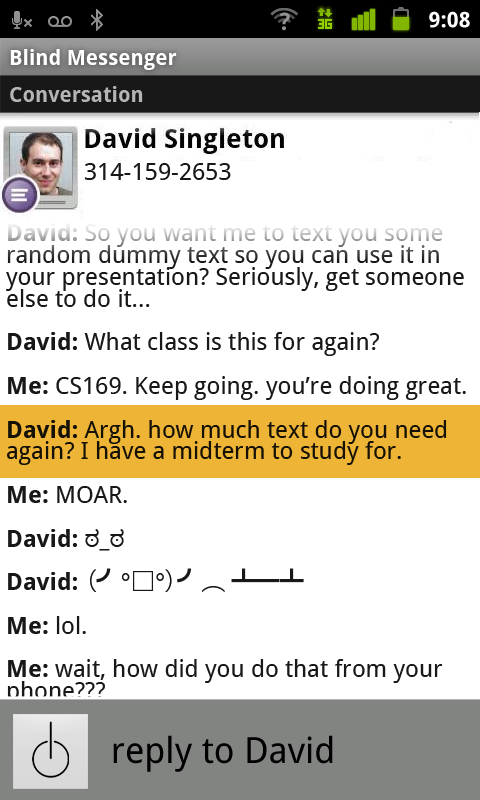
<style>
.page{position:relative;width:480px;height:800px;background:#ffffff}
.page>*{position:absolute;margin:0}
.t1{font:21.5px "DroidSans-Bold";letter-spacing:0.005em;color:#ffffff}
.t2{font:21px "DroidSans-Bold";color:#ffffff}
.t3{font:21px "DroidSans-Bold";color:#b5b5b5}
.t4{font:24px "DroidSans";color:#181818}
.t5{font:24px/21.8px "DroidSans";color:#181818}
.t6{font:24px/21.8px "DroidSans-Bold";color:#181818}
.t7{font:24px/21.8px "Tunga";color:#181818}
.t8{font:24px/21.8px "KozGoPr6N-Regular";color:#181818}
.t9{font:36px "DroidSans";color:#000000}
</style>
<div class="page">
<p class="t1" style="left:429px;top:11px;width:41px;height:17px">9:08</p>
<p class="t2" style="left:10px;top:49px;width:167px;height:21px">Blind Messenger</p>
<p class="t3" style="left:10px;top:86px;width:133px;height:16px">Conversation</p>
<p class="t4" style="left:84px;top:163px;width:147px;height:17px">314-159-2653</p>
<p class="t5" style="left:6px;top:223px;width:460px;height:482px"><span class="t6">David: </span>So you want me to text you some random dummy text so you can use it in your presentation? Seriously, get someone else to do it...<br><br><span class="t6">David: </span>What class is this for again?<br><br><span class="t6">Me:</span> CS169. Keep going. you’re doing great.<br><br><span class="t6">David: </span>Argh. how much text do you need again? I have a midterm to study for.<br><br><span class="t6">Me: </span>MOAR.<br><br><span class="t6">David: </span><span class="t7">ಠ</span>_<span class="t7">ಠ<br><br></span><span class="t6">David: </span><span class="t8">（╯</span>°<span class="t8">□</span>°<span class="t8">）╯︵ ┻━┻<br><br></span><span class="t6">Me:</span> lol.<br><br><span class="t6">Me:</span> wait, how did you do that from your phone???<br><br>David: had enough of this shit.<br>Me:<br>Me:<br>David:</p>
<p class="t9" style="left:113px;top:735px;width:220px;height:37px">reply to David</p>
</div>
